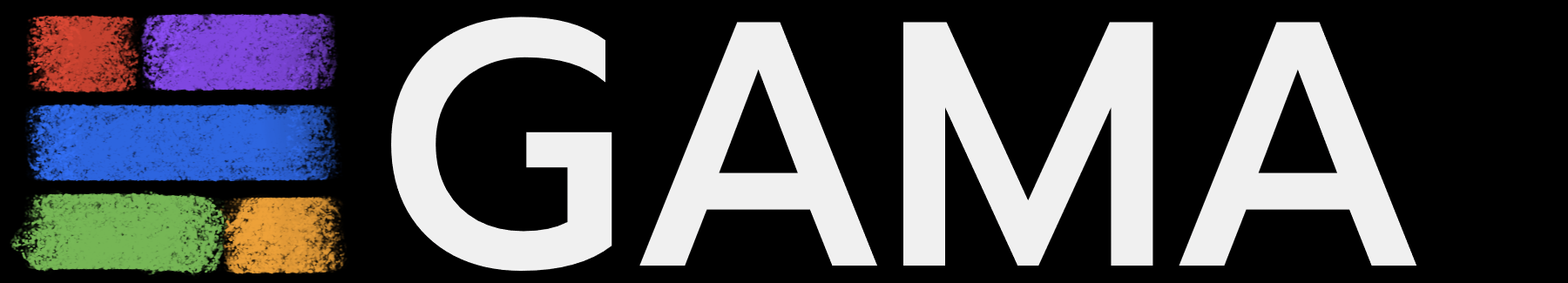
<style>
.page{position:relative;width:1568px;height:283px;background:#000000}
.page>*{position:absolute;margin:0}
.t1{font:348.4px "Prompt-Medium";color:#f0f0f0}
</style>
<div class="page">
<p class="t1" style="left:391px;top:17px;width:1026px;height:254px">GAMA</p>
</div>
